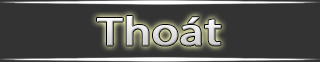
<style>
.page{position:relative;width:320px;height:62px;background:#333333}
.page>*{position:absolute;margin:0}
.t1{font:39.6px "MyriadPro-Regular";color:#dfdfdf;font-weight:bold;scale:1.24 1}
</style>
<div class="page">
<p class="t1" style="left:97px;top:16px;width:124px;height:30px">Thoát</p>
</div>
